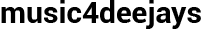
<style>
.page{position:relative;width:202px;height:29px;background:#ffffff}
.page>*{position:absolute;margin:0}
.t1{font:30px "Roboto-Bold";color:#000000}
</style>
<div class="page">
<p class="t1" style="left:1px;top:0px;width:200px;height:29px">music4deejays</p>
</div>
